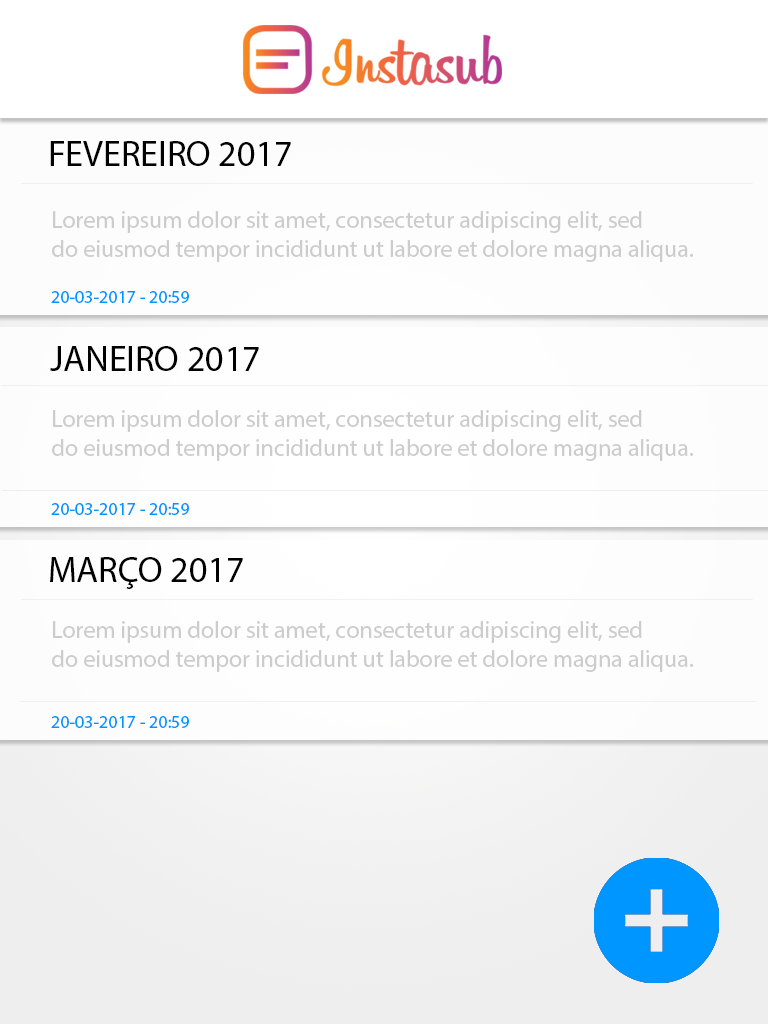
<style>
.page{position:relative;width:768px;height:1024px}
.page>*{position:absolute;margin:0}
.t1{font:36px "MyriadPro-Regular";color:#000000}
.t2{font:24px "MyriadPro-Regular";color:#cccccc}
.t3{font:18px "MyriadPro-Regular";color:#0096ff}
</style>
<div class="page">
<p class="t1" style="left:50px;top:141px;width:241px;height:25px">FEVEREIRO 2017</p>
<p class="t2" style="left:52px;top:211px;width:642px;height:51px">Lorem ipsum dolor sit amet, consectetur adipiscing elit, sed <br>do eiusmod tempor incididunt ut labore et dolore magna aliqua.</p>
<p class="t3" style="left:51px;top:291px;width:138px;height:12px">20-03-2017 - 20:59</p>
<p class="t1" style="left:50px;top:346px;width:209px;height:25px">JANEIRO 2017</p>
<p class="t2" style="left:52px;top:410px;width:642px;height:51px">Lorem ipsum dolor sit amet, consectetur adipiscing elit, sed <br>do eiusmod tempor incididunt ut labore et dolore magna aliqua.</p>
<p class="t3" style="left:51px;top:503px;width:138px;height:12px">20-03-2017 - 20:59</p>
<p class="t1" style="left:50px;top:557px;width:193px;height:32px">MARÇO 2017</p>
<p class="t2" style="left:52px;top:621px;width:642px;height:51px">Lorem ipsum dolor sit amet, consectetur adipiscing elit, sed <br>do eiusmod tempor incididunt ut labore et dolore magna aliqua.</p>
<p class="t3" style="left:51px;top:716px;width:138px;height:12px">20-03-2017 - 20:59</p>
</div>
